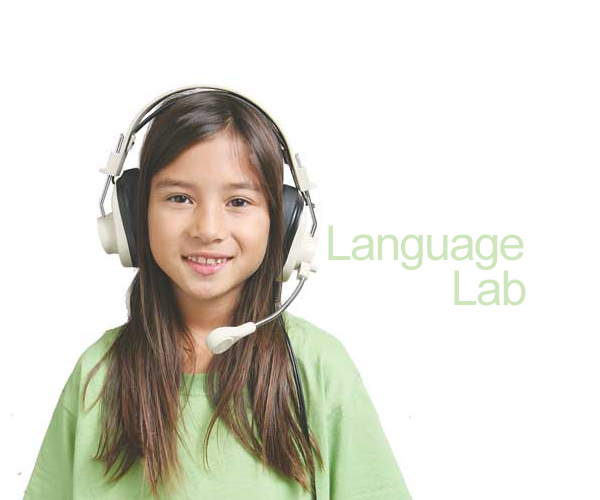
<style>
.page{position:relative;width:600px;height:500px;background:#ffffff}
.page>*{position:absolute;margin:0}
.t1{font:48px "ArialMT";letter-spacing:-0.04em;color:#cfe6bc}
</style>
<div class="page">
<p class="t1" style="left:328px;top:225px;width:196px;height:45px">Language</p>
<p class="t1" style="left:454px;top:270px;width:72px;height:36px">Lab</p>
</div>
